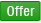
<style>
.page{position:relative;width:41px;height:23px}
.page>*{position:absolute;margin:0}
.t1{font:14px "HelveticaNeueLTCom-Cn";letter-spacing:0.04em;color:#ffffff}
</style>
<div class="page">
<p class="t1" style="left:7px;top:6px;width:28px;height:10px">Offer</p>
</div>
